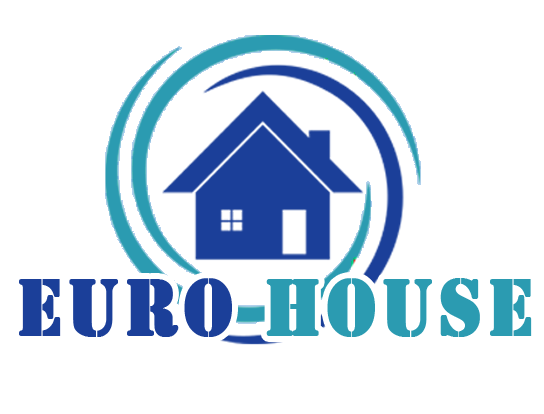
<style>
.page{position:relative;width:544px;height:414px;background:#ffffff}
.page>*{position:absolute;margin:0}
.t1{font:83.7px "Stencil";letter-spacing:0.05em;color:#2b9bb1;font-weight:bold;scale:0.91 1}
.t2{font:83.7px "Stencil";letter-spacing:0.05em;color:#1b3f99;font-weight:bold;scale:0.91 1}
</style>
<div class="page">
<p class="t1" style="left:19px;top:278px;width:513px;height:59px"><span class="t2">EURO</span> HOUSE</p>
</div>
